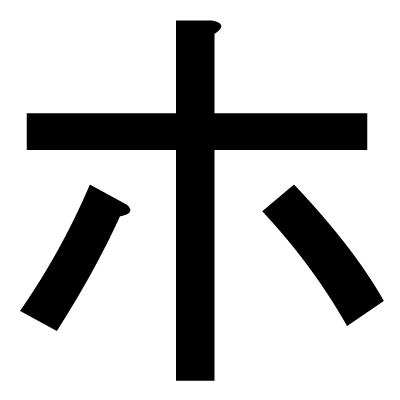
<style>
.page{position:relative;width:400px;height:400px;background:#ffffff}
.page>*{position:absolute;margin:0}
.t1{font:424.8px "MS-PGothic";color:#000000}
</style>
<div class="page">
<p class="t1" style="left:20px;top:20px;width:364px;height:361px">ホ</p>
</div>
